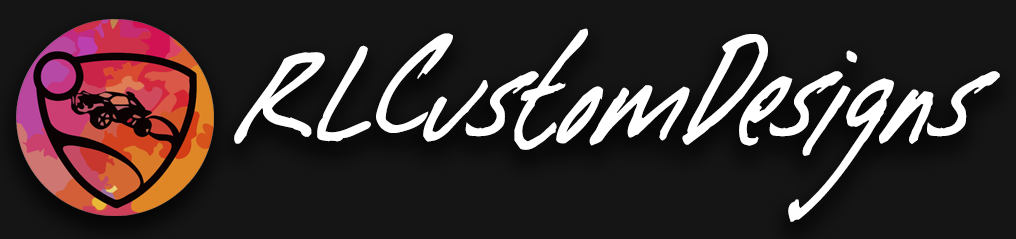
<style>
.page{position:relative;width:1016px;height:239px;background:#151515}
.page>*{position:absolute;margin:0}
.t1{font:145px "ColdSpaghettiBTN";letter-spacing:0.003em;color:#ffffff}
</style>
<div class="page">
<p class="t1" style="left:234px;top:28px;width:766px;height:194px">RLCustomDesigns</p>
</div>
